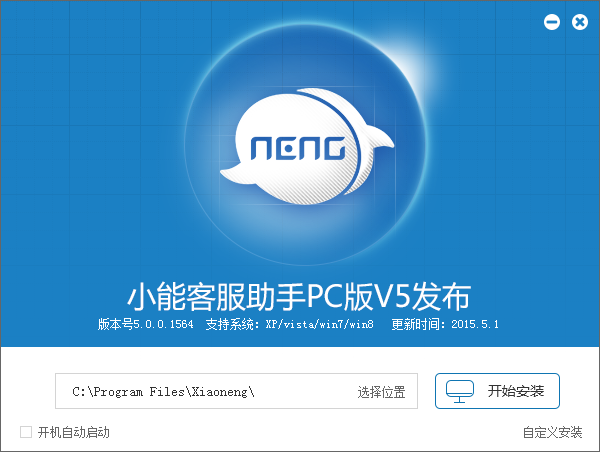
<style>
.page{position:relative;width:600px;height:452px;background:#1b80c4}
.page>*{position:absolute;margin:0}
.t1{font:30px "MicrosoftYaHei";color:#ffffff}
.t2{font:12px "SimSun";color:#ffffff}
.t3{font:14px "SimSun";color:#333333}
.t4{font:12px "SimSun";color:#666666}
.t5{font:14px "MicrosoftYaHei";color:#333333}
</style>
<div class="page">
<p class="t1" style="left:127px;top:281px;width:344px;height:30px">小能客服助手PC版V5发布</p>
<p class="t2" style="left:98px;top:318px;width:400px;height:12px">版本号5.0.0.1564  支持系统：XP/vista/win7/win8   更新时间：2015.5.1</p>
<p class="t3" style="left:73px;top:386px;width:181px;height:12px">C:\Program Files\Xiaoneng\</p>
<p class="t4" style="left:358px;top:386px;width:47px;height:12px">选择位置</p>
<p class="t5" style="left:488px;top:385px;width:56px;height:12px">开始安装</p>
<p class="t4" style="left:38px;top:426px;width:71px;height:12px">开机自动启动</p>
<p class="t4" style="left:524px;top:426px;width:58px;height:12px">自定义安装</p>
</div>
